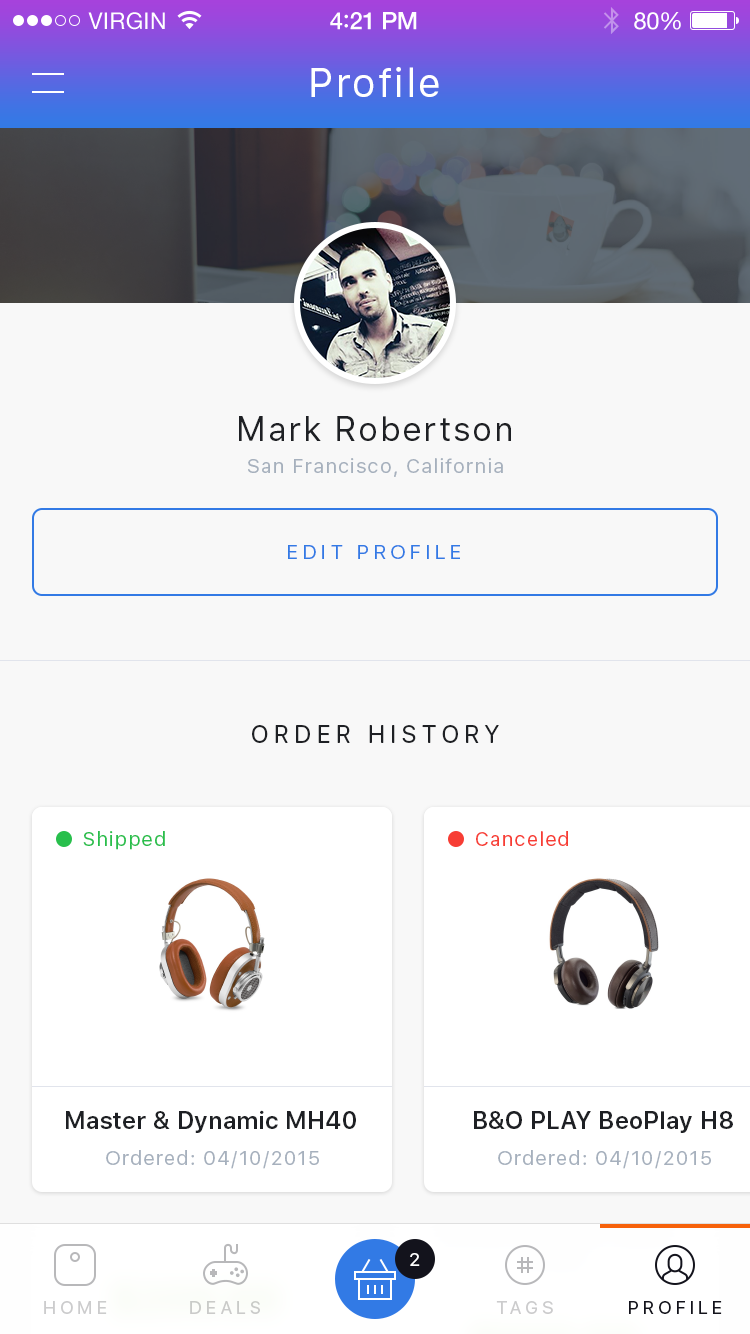
<style>
.page{position:relative;width:750px;height:1334px;background:#f8f8f8}
.page>*{position:absolute;margin:0}
.t1{font:40px "SFUIText-Regular";letter-spacing:0.05em;color:#ffffff}
.t2{font:34px "SFUIText-Regular";letter-spacing:0.05em;color:#1e2024}
.t3{font:20px "SFUIText-Regular";letter-spacing:0.05em;color:#a6b0bd}
.t4{font:20px "SFUIText-Regular";letter-spacing:0.2em;color:#327ae5;text-transform:uppercase}
.t5{font:24px "SFUIText-Regular";letter-spacing:0.2em;color:#1e2024;text-transform:uppercase}
.t6{font:20px "SFUIText-Regular";letter-spacing:0.05em;color:#28bf4c}
.t7{font:20px "SFUIText-Regular";letter-spacing:0.05em;color:#f73d34}
.t8{font:24px "SFUIText-Semibold";color:#1e2024}
.t9{font:18px "SFUIText-Regular";color:#ffffff;text-transform:uppercase}
.t10{font:18px "SFUIText-Regular";letter-spacing:0.2em;color:#cccccd;text-transform:uppercase}
.t11{font:18px "SFUIText-Regular";letter-spacing:0.2em;color:#cacbc9;text-transform:uppercase}
.t12{font:18px "SFUIText-Regular";letter-spacing:0.2em;color:#13131c;text-transform:uppercase}
</style>
<div class="page">
<p class="t1" style="left:311px;top:67px;width:128px;height:30px">Profile</p>
<p class="t2" style="left:239px;top:416px;width:272px;height:25px">Mark Robertson</p>
<p class="t3" style="left:248px;top:458px;width:255px;height:19px">San Francisco, California</p>
<p class="t4" style="left:288px;top:545px;width:172px;height:14px">edit profile</p>
<p class="t5" style="left:252px;top:725px;width:247px;height:18px">order history</p>
<p class="t6" style="left:83px;top:831px;width:82px;height:19px">Shipped</p>
<p class="t7" style="left:476px;top:831px;width:92px;height:15px">Canceled</p>
<p class="t8" style="left:66px;top:1110px;width:290px;height:23px">Master &amp; Dynamic MH40</p>
<p class="t8" style="left:474px;top:1111px;width:259px;height:22px">B&amp;O PLAY BeoPlay H8</p>
<p class="t3" style="left:106px;top:1150px;width:213px;height:19px">Ordered: 04/10/2015</p>
<p class="t3" style="left:498px;top:1150px;width:213px;height:19px">Ordered: 04/10/2015</p>
<p class="t9" style="left:410px;top:1253px;width:10px;height:13px">2</p>
<p class="t10" style="left:44px;top:1301px;width:63px;height:13px">home</p>
<p class="t11" style="left:190px;top:1301px;width:70px;height:13px">deals</p>
<p class="t10" style="left:496px;top:1301px;width:57px;height:13px">tags</p>
<p class="t12" style="left:629px;top:1301px;width:93px;height:13px">profile</p>
</div>
